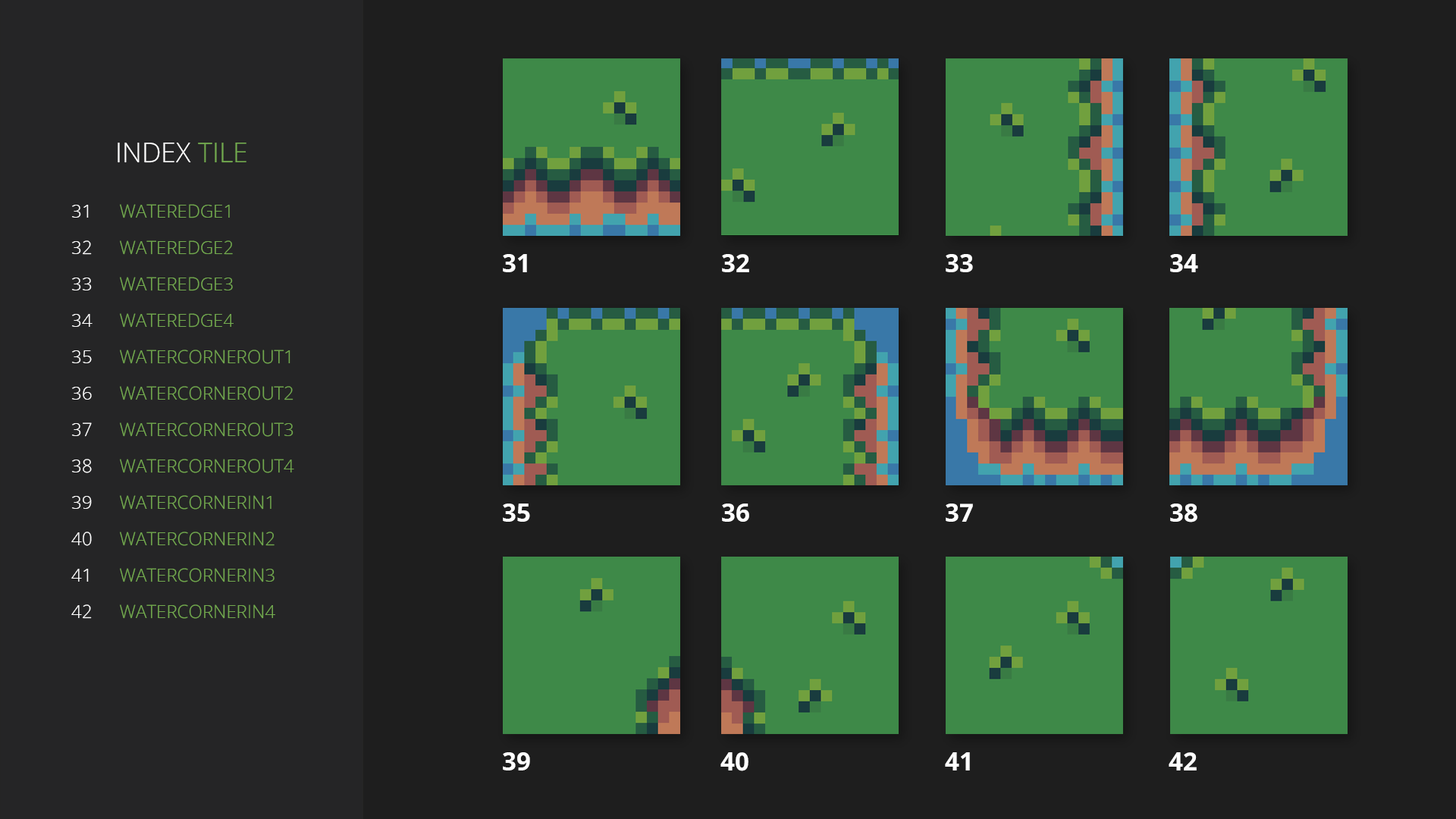
<style>
.page{position:relative;width:1456px;height:819px;background:#1e1e1e}
.page>*{position:absolute;margin:0}
.t1{font:27.3px "OpenSans-Light";color:#ffffff;text-transform:uppercase}
.t2{font:27.3px "OpenSans-Light";color:#73aa4f;text-transform:uppercase}
.t3{font:18.2px/36.4px "OpenSans-Light";color:#ffffff;text-transform:uppercase}
.t4{font:18.2px/36.4px "OpenSans-Light";color:#73aa4f;text-transform:uppercase}
.t5{font:25.1px "OpenSans-Bold";color:#ffffff;text-transform:uppercase}
</style>
<div class="page">
<p class="t1" style="left:118px;top:143px;width:128px;height:20px">index<span class="t2"> tile</span></p>
<p class="t3" style="left:71px;top:205px;width:22px;height:414px;text-align:center">31<br>32<br>33<br>34<br>35<br>36<br>37<br>38<br>39<br>40<br>41<br>42</p>
<p class="t4" style="left:120px;top:204px;width:174px;height:415px">waterEdge1<br>waterEdge2<br>waterEdge3<br>waterEdge4<br>waterCornerOut1<br>waterCornerOut2<br>waterCornerOut3<br>waterCornerOut4<br>waterCornerIn1<br>waterCornerIn2<br>waterCornerIn3<br>waterCornerIn4</p>
<p class="t5" style="left:503px;top:254px;width:24px;height:18px">31</p>
<p class="t5" style="left:722px;top:254px;width:27px;height:18px">32</p>
<p class="t5" style="left:946px;top:254px;width:27px;height:18px">33</p>
<p class="t5" style="left:1170px;top:254px;width:28px;height:18px">34</p>
<p class="t5" style="left:503px;top:504px;width:27px;height:18px">35</p>
<p class="t5" style="left:722px;top:504px;width:27px;height:18px">36</p>
<p class="t5" style="left:946px;top:504px;width:27px;height:18px">37</p>
<p class="t5" style="left:1170px;top:504px;width:27px;height:18px">38</p>
<p class="t5" style="left:503px;top:752px;width:27px;height:18px">39</p>
<p class="t5" style="left:720px;top:752px;width:28px;height:19px">40</p>
<p class="t5" style="left:945px;top:752px;width:25px;height:18px">41</p>
<p class="t5" style="left:1169px;top:752px;width:28px;height:18px">42</p>
</div>
